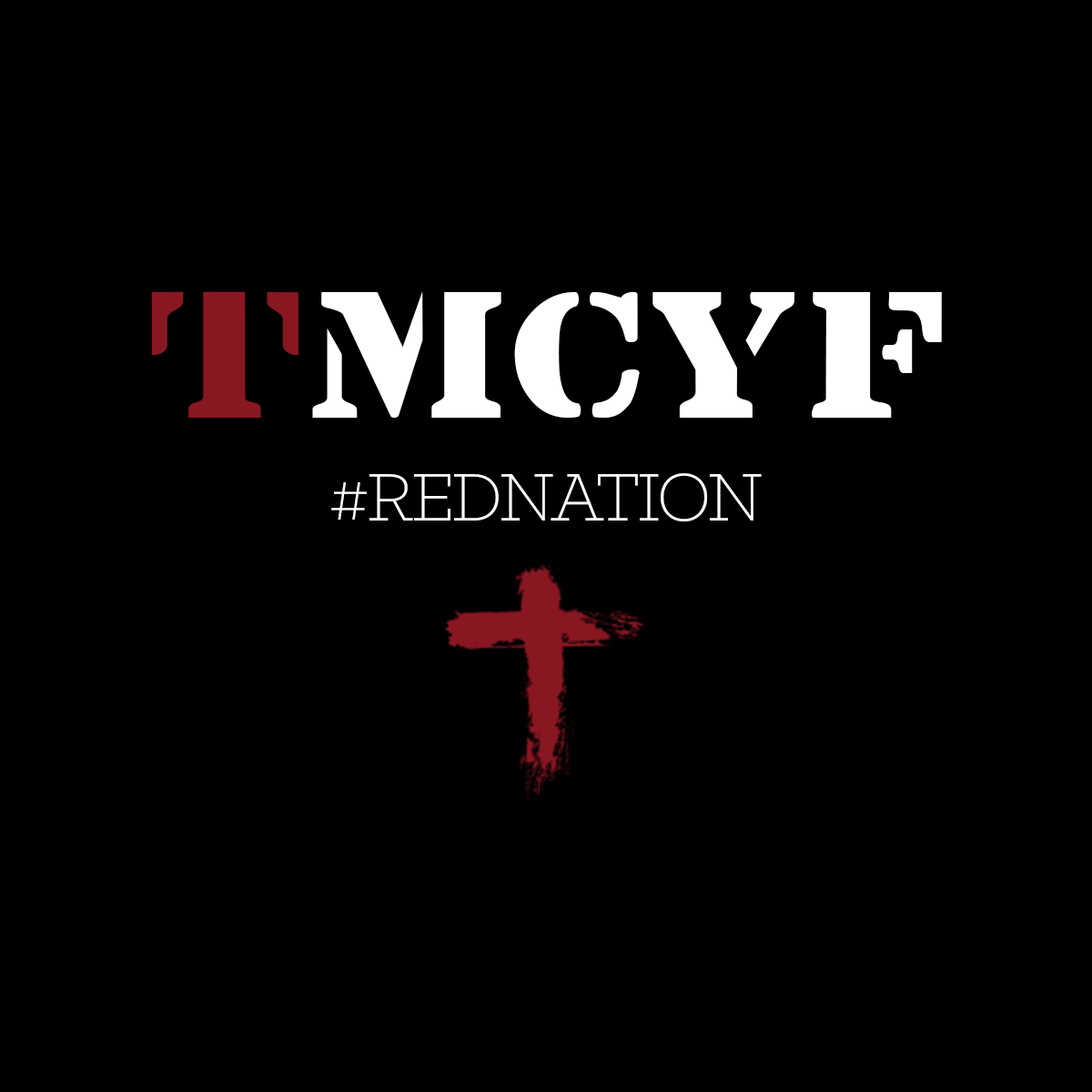
<style>
.page{position:relative;width:1092px;height:1092px;background:#000000}
.page>*{position:absolute;margin:0}
.t1{font:163.5px "Lintsec";color:#ffffff}
.t2{font:163.5px "Lintsec";color:#891722}
.t3{font:76.1px "KlinicSlab-Light";letter-spacing:-0.035em;color:#ffffff}
</style>
<div class="page">
<p class="t1" style="left:151px;top:291px;width:791px;height:127px"><span class="t2">T</span>MCYF</p>
<p class="t3" style="left:331px;top:473px;width:431px;height:48px">#REDNATION</p>
</div>
